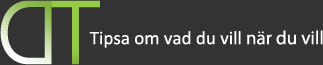
<style>
.page{position:relative;width:323px;height:65px;background:#333333}
.page>*{position:absolute;margin:0}
.t1{font:114.3px "SinhalaSangamMN"}
.t2{font:114.3px "SinhalaSangamMN";color:#95cb47}
.t3{font:19.1px "Calibri";color:#ffffff}
.t4{font:19.1px "MyriadPro-Regular";color:#ffffff}
</style>
<div class="page">
<p class="t1" style="left:0px;top:0px;width:52px;height:65px;rotate:180deg">D</p>
<p class="t2" style="left:51px;top:0px;width:49px;height:65px">T</p>
<p class="t3" style="left:89px;top:30px;width:234px;height:18px">Tipsa om vad du vill<span class="t4"> när du vill</span></p>
</div>
